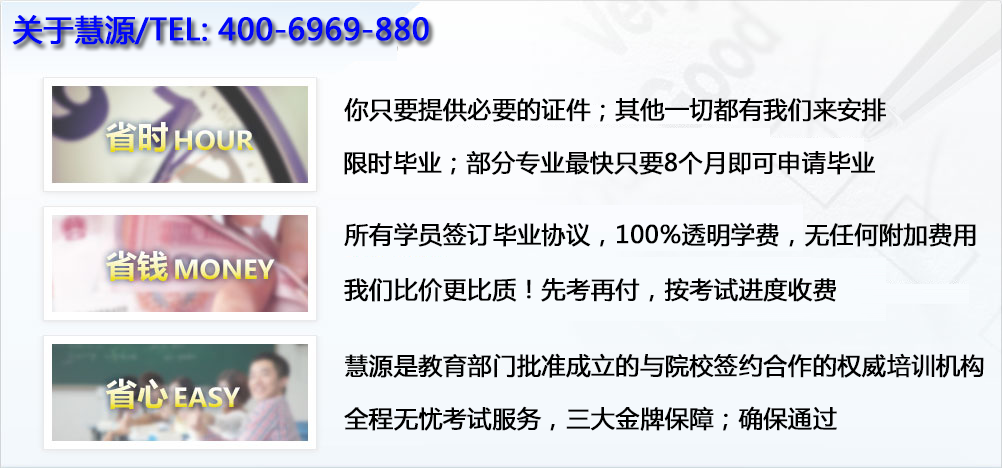
<style>
.page{position:relative;width:1002px;height:468px}
.page>*{position:absolute;margin:0}
.t1{font:30px "MicrosoftYaHei";color:#0006f8;font-weight:bold}
.t2{font:24px "MicrosoftYaHei";color:#000000;font-weight:bold}
.t3{font:24px "MicrosoftYaHei";color:#010101;font-weight:bold}
</style>
<div class="page">
<p class="t1" style="left:12px;top:15px;width:417px;height:30px">关于慧源/TEL: 400-6969-880</p>
<p class="t2" style="left:344px;top:97px;width:542px;height:25px">你只要提供必要的证件；其他一切都有我们来安排</p>
<p class="t2" style="left:344px;top:151px;width:531px;height:24px">限时毕业；部分专业最快只要8个月即可申请毕业</p>
<p class="t2" style="left:344px;top:222px;width:632px;height:25px">所有学员签订毕业协议，100%透明学费，无任何附加费用</p>
<p class="t3" style="left:344px;top:277px;width:492px;height:25px">我们比价更比质！先考再付，按考试进度收费</p>
<p class="t2" style="left:345px;top:353px;width:639px;height:25px">慧源是教育部门批准成立的与院校签约合作的权威培训机构</p>
<p class="t2" style="left:344px;top:406px;width:493px;height:25px">全程无忧考试服务，三大金牌保障；确保通过</p>
</div>
